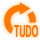
<style>
.page{position:relative;width:40px;height:40px}
.page>*{position:absolute;margin:0}
.t1{font:14.7px "RodinNTLGPro-B";letter-spacing:0.05em;color:#fd7800;scale:0.51 1}
</style>
<div class="page">
<p class="t1" style="left:14px;top:25px;width:25px;height:13px">TUDO</p>
</div>
